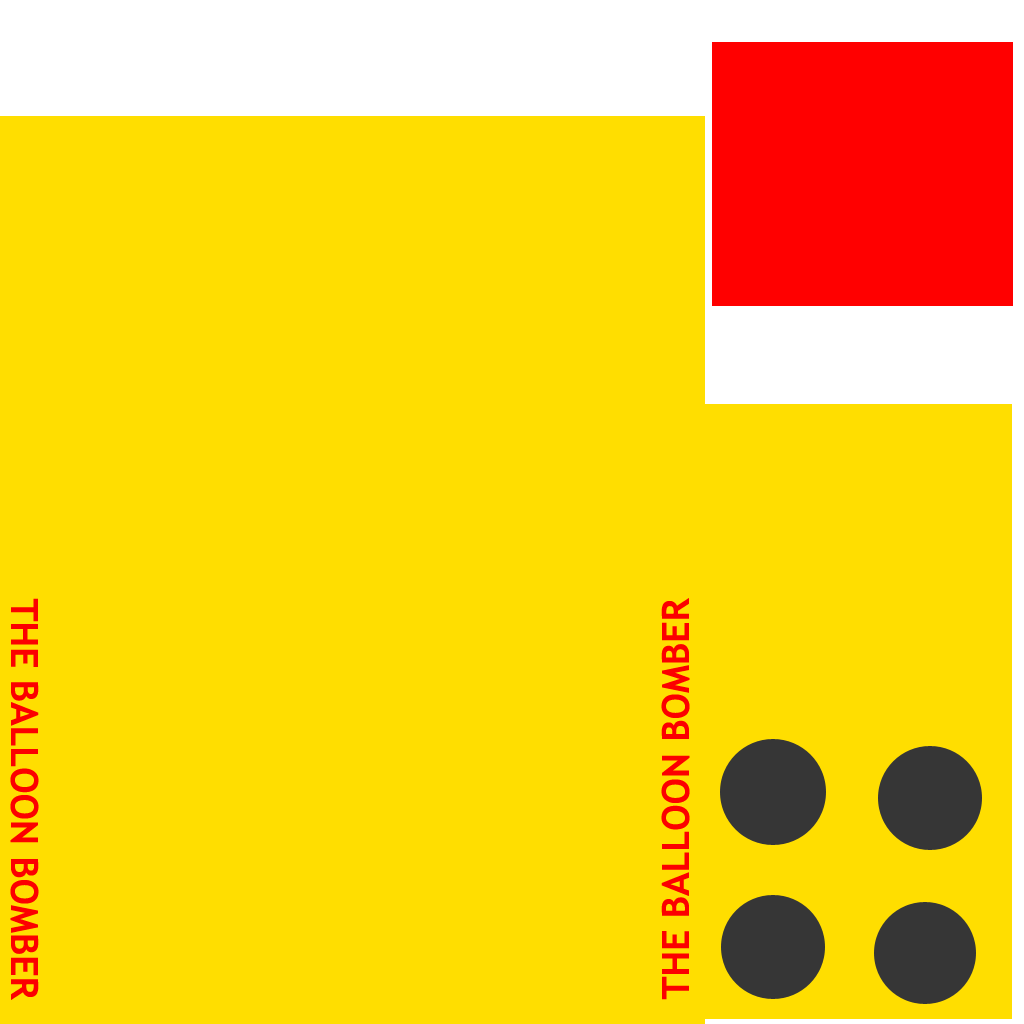
<style>
.page{position:relative;width:1024px;height:1024px;background:#ffde00}
.page>*{position:absolute;margin:0}
.t1{font:37.5px "TrebuchetMS-Bold";color:#fc0000}
</style>
<div class="page">
<p class="t1" style="left:10px;top:598px;width:29px;height:402px;rotate:90deg">THE BALLOON BOMBER</p>
<p class="t1" style="left:661px;top:598px;width:29px;height:402px;rotate:-90deg">THE BALLOON BOMBER</p>
</div>
